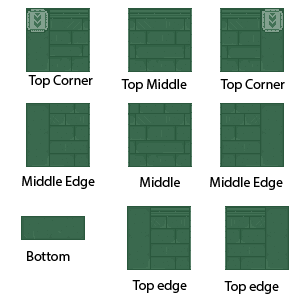
<style>
.page{position:relative;width:300px;height:300px;background:#ffffff}
.page>*{position:absolute;margin:0}
.t1{font:14px "MyriadPro-Regular";color:#000000}
</style>
<div class="page">
<p class="t1" style="left:28px;top:75px;width:65px;height:13px">Top Corner</p>
<p class="t1" style="left:121px;top:79px;width:66px;height:13px">Top Middle</p>
<p class="t1" style="left:220px;top:79px;width:65px;height:13px">Top Corner</p>
<p class="t1" style="left:22px;top:176px;width:73px;height:13px">Middle Edge</p>
<p class="t1" style="left:140px;top:177px;width:40px;height:10px">Middle</p>
<p class="t1" style="left:210px;top:177px;width:73px;height:13px">Middle Edge</p>
<p class="t1" style="left:27px;top:251px;width:43px;height:10px">Bottom</p>
<p class="t1" style="left:132px;top:280px;width:55px;height:13px">Top edge</p>
<p class="t1" style="left:224px;top:281px;width:55px;height:13px">Top edge</p>
</div>
